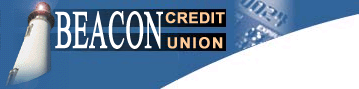
<style>
.page{position:relative;width:359px;height:89px;background:#ffffff}
.page>*{position:absolute;margin:0}
.t1{font:52.9px "TimesNewRomanPSMT";color:#ffffff;font-weight:bold;scale:0.48 1}
.t2{font:15px "Arial-BoldMT";letter-spacing:0.02em;color:#ffcc99;font-weight:bold}
.t3{font:15px "Arial-BoldMT";letter-spacing:0.1em;color:#ffcc99;font-weight:bold}
</style>
<div class="page">
<p class="t1" style="left:55px;top:11px;width:108px;height:38px">BEACON</p>
<p class="t2" style="left:165px;top:12px;width:60px;height:12px">CREDIT</p>
<p class="t3" style="left:167px;top:37px;width:56px;height:12px">UNION</p>
</div>
